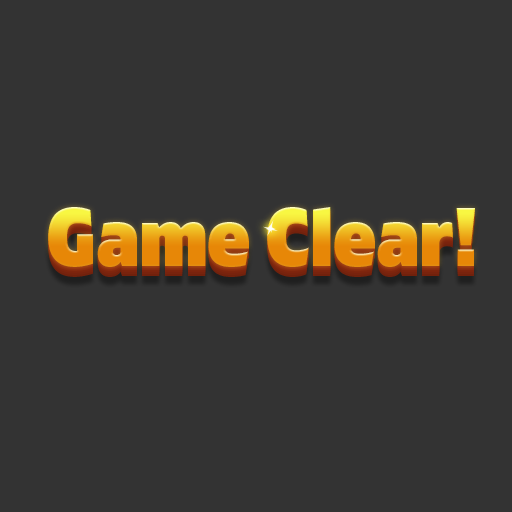
<style>
.page{position:relative;width:512px;height:512px;background:#333333}
.page>*{position:absolute;margin:0}
.t1{font:83.3px "Gilam-BlackDEMO";letter-spacing:-0.005em;scale:0.95 1}
</style>
<div class="page">
<p class="t1" style="left:48px;top:207px;width:427px;height:60px">Game Clear!</p>
</div>
